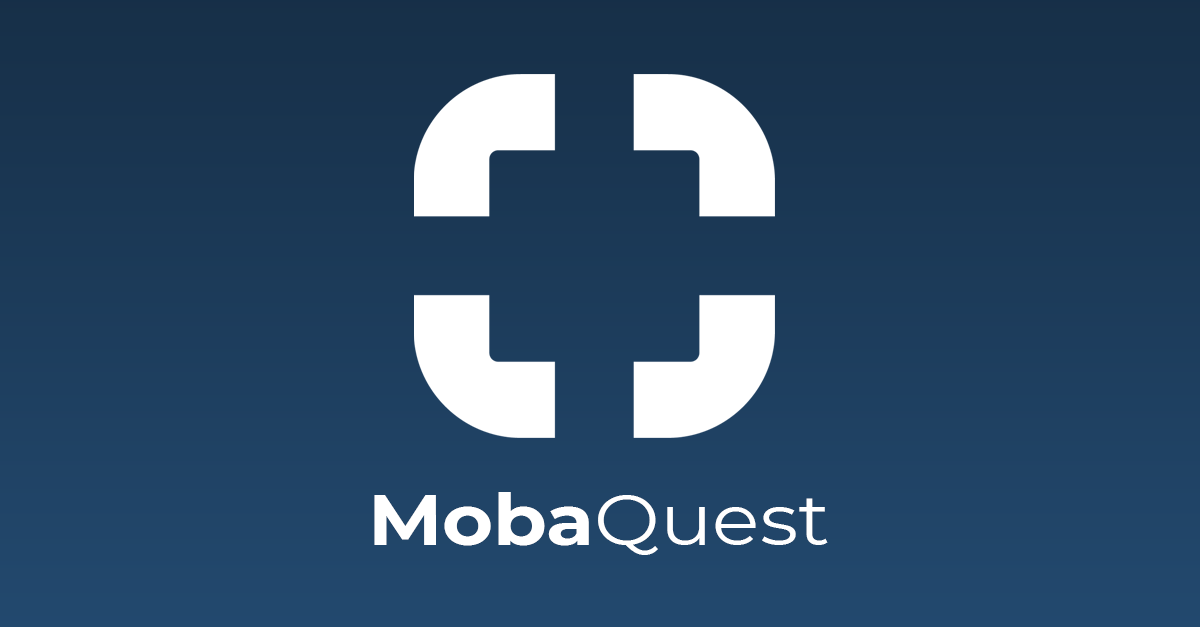
<style>
.page{position:relative;width:1200px;height:627px}
.page>*{position:absolute;margin:0}
.t1{font:70.9px "Montserrat-Regular";color:#ffffff;scale:1.1 1}
.t2{font:70.9px "Montserrat-Bold";color:#ffffff;scale:1.1 1}
</style>
<div class="page">
<p class="t1" style="left:374px;top:492px;width:454px;height:63px"><span class="t2">Moba</span>Quest</p>
</div>
